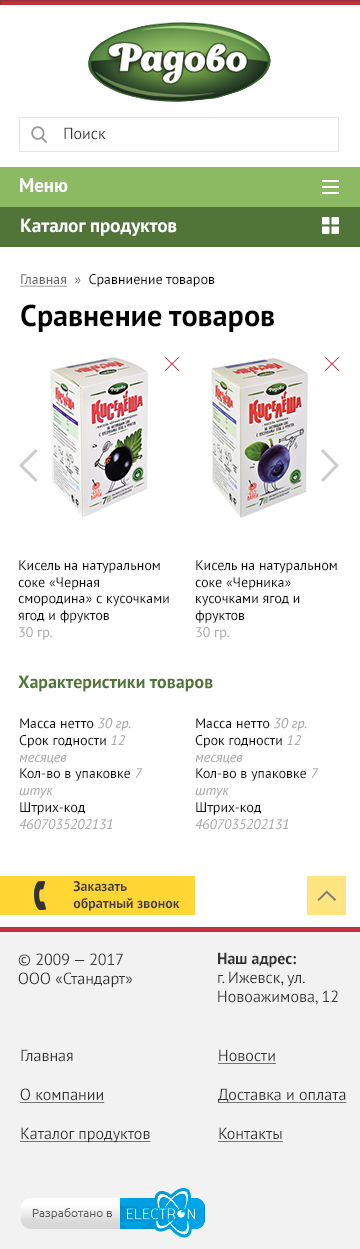
<style>
.page{position:relative;width:360px;height:1249px;background:#ffffff}
.page>*{position:absolute;margin:0}
.t1{font:16px "PTSans-Regular";color:#333333}
.t2{font:19px "PTSans-Bold";color:#ffffff}
.t3{font:14px "PTSans-Regular";color:#000000}
.t4{font:14px "PTSans-Regular";color:#666666;text-decoration:underline}
.t5{font:14px "PTSans-Regular";color:#666666}
.t6{font:30px "PTSans-Bold";color:#000000}
.t7{font:14px "PTSans-Regular";color:#111111}
.t8{font:14px "PTSans-Regular";color:#aaaaaa}
.t9{font:18px "PTSans-Bold";color:#517539}
.t10{font:14px "PTSans-Italic";color:#aaaaaa}
.t11{font:14px "PTSans-Bold";color:#3e3e3e}
.t12{font:16px "PTSans-Bold";color:#333333}
.t13{font:16px/39px "PTSans-Regular";color:#333333;text-decoration:underline}
.t14{font:16px/39px "PTSans-Regular";color:#333333}
</style>
<div class="page">
<p class="t1" style="left:64px;top:127px;width:42px;height:13px">Поиск</p>
<p class="t2" style="left:20px;top:178px;width:48px;height:14px">Меню</p>
<p class="t2" style="left:21px;top:218px;width:156px;height:18px">Каталог продуктов</p>
<p class="t3" style="left:20px;top:274px;width:195px;height:13px"><span class="t4">Главная</span><span class="t5">  »  </span>Сравниение товаров</p>
<p class="t6" style="left:21px;top:304px;width:253px;height:28px">Сравнение товаров</p>
<p class="t7" style="left:18px;top:560px;width:151px;height:80px">Кисель на натуральном соке «Черная смородина» с кусочками ягод и фруктов<br><span class="t8">30 гр.</span></p>
<p class="t7" style="left:195px;top:560px;width:142px;height:80px">Кисель на натуральном соке «Черника» кусочками ягод и фруктов<br><span class="t8">30 гр.</span></p>
<p class="t9" style="left:18px;top:675px;width:195px;height:17px">Характеристики товаров</p>
<p class="t7" style="left:19px;top:718px;width:124px;height:112px">Масса нетто <span class="t10">30 гр.<br></span>Срок годности <span class="t10">12 месяцев<br></span>Кол-во в упаковке <span class="t10">7 штук<br></span>Штрих-код <span class="t10">4607035202131</span></p>
<p class="t7" style="left:195px;top:718px;width:124px;height:112px">Масса нетто <span class="t10">30 гр.<br></span>Срок годности <span class="t10">12 месяцев<br></span>Кол-во в упаковке <span class="t10">7 штук<br></span>Штрих-код <span class="t10">4607035202131</span></p>
<p class="t11" style="left:73px;top:881px;width:107px;height:30px">Заказать <br>обратный звонок</p>
<p class="t1" style="left:18px;top:953px;width:115px;height:35px">© 2009 — 2017<br>ООО «Стандарт»</p>
<p class="t1" style="left:218px;top:952px;width:120px;height:53px"><span class="t12">Наш адрес:<br></span>г. Ижевск, ул. <br>Новоажимова, 12</p>
<p class="t13" style="left:20px;top:1049px;width:131px;height:94px"><span class="t14">Главная<br></span>О компании<br>Каталог продуктов</p>
<p class="t13" style="left:218px;top:1049px;width:129px;height:93px">Новости<br>Доставка и оплата<br>Контакты</p>
</div>
